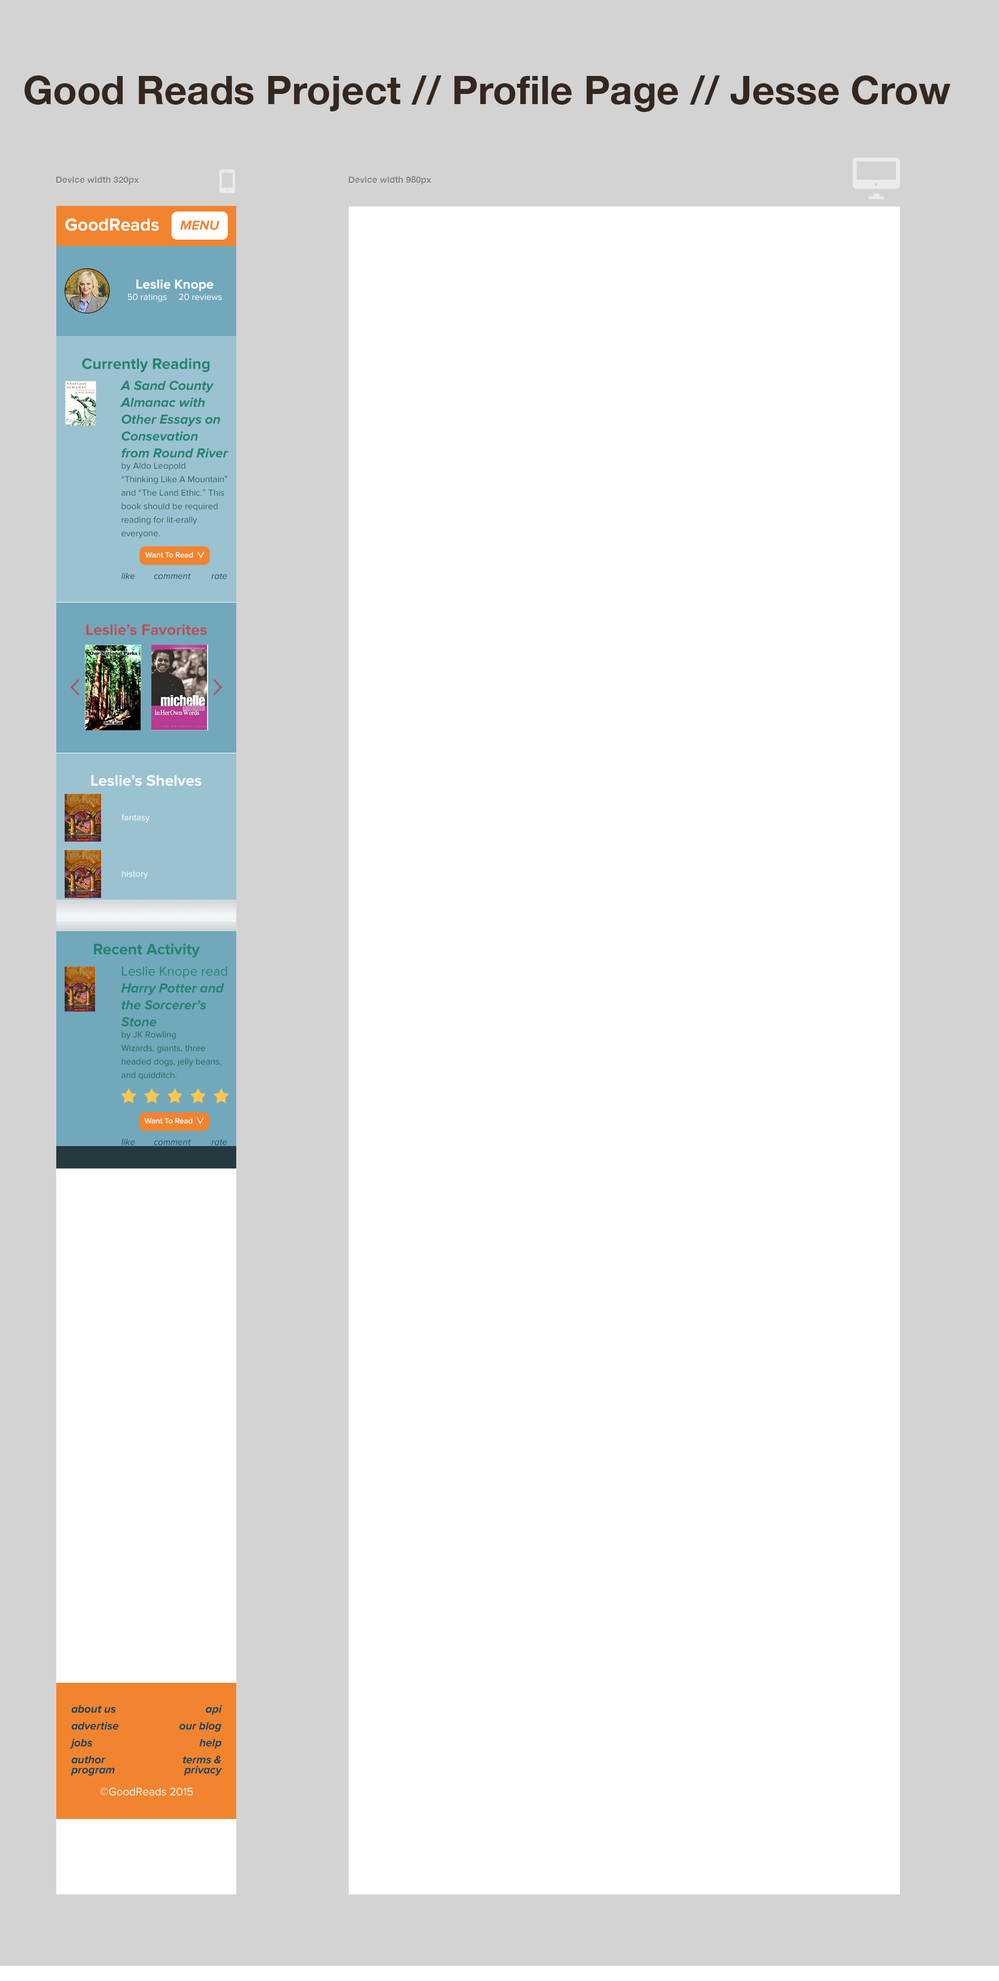
<style>
.page{position:relative;width:999px;height:1981px;background:#ffffff}
.page>*{position:absolute;margin:0}
.t1{font:39.4px "HelveticaNeue-Bold";color:#35271e}
.t2{font:9px "HelveticaNeue-Bold";color:#878787}
.t3{font:18px "ProximaNova-Bold";color:#ffffff}
.t4{font:13.5px "ProximaNova-BoldIt";color:#f2842f}
.t5{font:9px/11.2px "ProximaNova-Regular";color:#ffffff}
.t6{font:13.5px/16.9px "ProximaNova-Bold";color:#ffffff}
.t7{font:15.7px "ProximaNova-Bold";color:#23846f}
.t8{font:9px/13.5px "ProximaNova-Regular";color:#1d6757}
.t9{font:13.5px/16.9px "ProximaNova-BoldIt";color:#23846f}
.t10{font:9px/11.2px "ProximaNova-Regular";color:#1d6757}
.t11{font:7.9px "ProximaNova-Semibold";color:#ffffff}
.t12{font:9px "ProximaNova-RegularIt";color:#0f465a}
.t13{font:15.7px "ProximaNova-Bold";color:#b85156}
.t14{font:15.8px "ProximaNova-Bold";color:#fefefe}
.t15{font:9px "ProximaNova-Regular";color:#ffffff}
.t16{font:15.8px "ProximaNova-Bold";color:#23846f}
.t17{font:13.5px/16.9px "ProximaNova-Regular";color:#23846f}
.t18{font:11.2px/16.9px "ProximaNova-BoldIt";color:#0f465a}
.t19{font:11.2px/10.1px "ProximaNova-BoldIt";color:#0f465a}
.t20{font:11.2px "ProximaNova-Regular";color:#ffffff}
</style>
<div class="page">
<p class="t1" style="left:24px;top:75px;width:927px;height:37px">Good Reads Project // Profile Page // Jesse Crow</p>
<p class="t2" style="left:56px;top:177px;width:83px;height:7px">Device width 320px</p>
<p class="t2" style="left:349px;top:176px;width:82px;height:8px">Device width 980px</p>
<p class="t3" style="left:65px;top:218px;width:94px;height:13px">GoodReads</p>
<p class="t4" style="left:180px;top:220px;width:40px;height:10px">MENU</p>
<p class="t5" style="left:128px;top:279px;width:94px;height:23px;text-align:center"><span class="t6">Leslie Knope<br></span>50 ratings     20 reviews</p>
<p class="t7" style="left:82px;top:358px;width:128px;height:14px">Currently Reading</p>
<p class="t8" style="left:120px;top:380px;width:108px;height:158px"><span class="t9">A Sand County Almanac with Other Essays on <br>Consevation from Round River<br></span><span class="t10">by Aldo Leopold<br></span>“Thinking Like A Mountain” and “The Land Ethic.” This book should be required reading for lit-erally<br>everyone.</p>
<p class="t11" style="left:145px;top:552px;width:48px;height:5px">Want To Read</p>
<p class="t12" style="left:122px;top:573px;width:105px;height:6px">like        comment         rate</p>
<p class="t13" style="left:86px;top:624px;width:121px;height:11px">Leslie’s Favorites</p>
<p class="t14" style="left:91px;top:775px;width:110px;height:11px">Leslie’s Shelves</p>
<p class="t15" style="left:122px;top:814px;width:28px;height:8px">fantasy</p>
<p class="t15" style="left:122px;top:870px;width:26px;height:9px">history</p>
<p class="t16" style="left:94px;top:943px;width:106px;height:14px">Recent Activity</p>
<p class="t8" style="left:121px;top:966px;width:106px;height:113px"><span class="t17">Leslie Knope read </span><span class="t9">Harry Potter and the Sorcerer’s Stone <br></span><span class="t10">by JK Rowling<br></span>Wizards, giants, three headed dogs, jelly beans, and quidditch.</p>
<p class="t11" style="left:145px;top:1118px;width:47px;height:5px">Want To Read</p>
<p class="t12" style="left:122px;top:1138px;width:105px;height:7px">like        comment         rate</p>
<p class="t18" style="left:70px;top:1704px;width:49px;height:71px">about us<br>advertise<br>jobs<br>author <br><span class="t19">program</span></p>
<p class="t18" style="left:179px;top:1704px;width:43px;height:71px;text-align:right">api<br>our blog<br>help<br>terms &amp; <br><span class="t19">privacy</span></p>
<p class="t20" style="left:100px;top:1787px;width:93px;height:9px">©GoodReads 2015</p>
</div>
